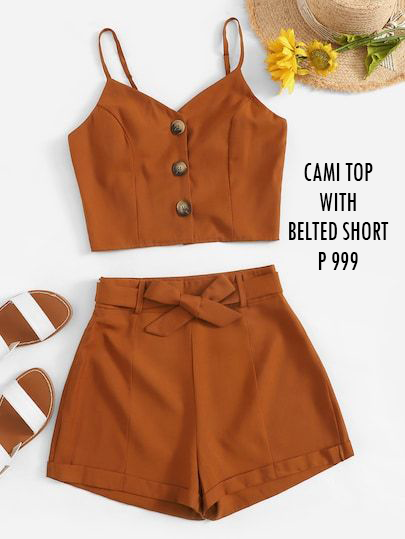
<style>
.page{position:relative;width:405px;height:539px;background:#f3f3f3}
.page>*{position:absolute;margin:0}
.t1{font:28.4px "TwCenMT-Condensed";color:#000000;scale:0.87 1}
</style>
<div class="page">
<p class="t1" style="left:289px;top:163px;width:100px;height:107px;text-align:center">CAMI TOP<br>WITH<br>BELTED SHORT<br>P 999</p>
</div>
